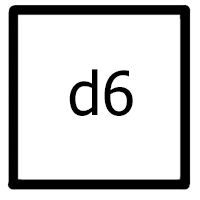
<style>
.page{position:relative;width:200px;height:200px;background:#ffffff}
.page>*{position:absolute;margin:0}
.t1{font:60px "Tahoma";color:#000000}
</style>
<div class="page">
<p class="t1" style="left:69px;top:69px;width:64px;height:47px">d6</p>
</div>
